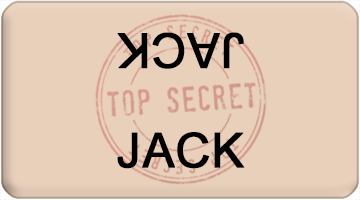
<style>
.page{position:relative;width:360px;height:200px;background:#e8d0bb}
.page>*{position:absolute;margin:0}
.t1{font:48px "ArialMT";color:#000000;font-weight:bold}
</style>
<div class="page">
<p class="t1" style="left:117px;top:32px;width:127px;height:37px;rotate:180deg">JACK</p>
<p class="t1" style="left:117px;top:132px;width:128px;height:37px">JACK</p>
</div>
